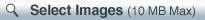
<style>
.page{position:relative;width:205px;height:20px;background:#f9f9f9}
.page>*{position:absolute;margin:0}
.t1{font:14px "Helvetica-Bold";color:#364149}
.t2{font:12px "Helvetica";color:#364149}
</style>
<div class="page">
<p class="t1" style="left:30px;top:4px;width:165px;height:14px">Select Images <span class="t2">(10 MB Max)</span></p>
</div>
